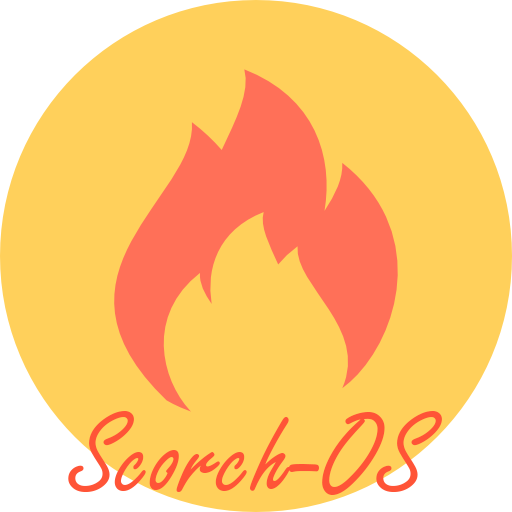
<style>
.page{position:relative;width:512px;height:512px;background:#ffd05b}
.page>*{position:absolute;margin:0}
.t1{font:124.1px "FreestyleScript-Regular";color:#ff5437}
</style>
<div class="page">
<p class="t1" style="left:68px;top:411px;width:374px;height:84px">Scorch-OS</p>
</div>
